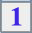
<style>
.page{position:relative;width:32px;height:33px}
.page>*{position:absolute;margin:0}
.t1{font:26.7px "TimesNewRomanPS-BoldMT";color:#3f25e0}
</style>
<div class="page">
<p class="t1" style="left:11px;top:7px;width:11px;height:19px">1</p>
</div>
